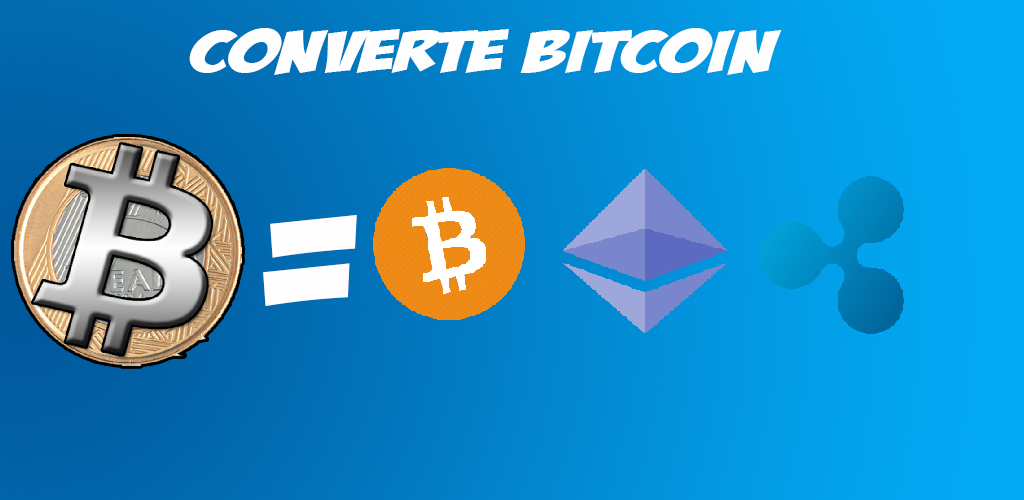
<style>
.page{position:relative;width:1024px;height:500px}
.page>*{position:absolute;margin:0}
.t1{font:57.6px "BadaBoomBB";color:#fefefe;scale:1.7 1}
.t2{font:227.6px "BadaBoomBB";color:#fefefe;scale:1.17 1}
</style>
<div class="page">
<p class="t1" style="left:189px;top:28px;width:593px;height:47px">Converte Bitcoin</p>
<p class="t2" style="left:263px;top:215px;width:94px;height:91px">=</p>
</div>
